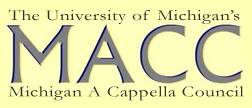
<style>
.page{position:relative;width:252px;height:108px;background:#ffffb4}
.page>*{position:absolute;margin:0}
.t1{font:15.2px "Garamond";letter-spacing:0.025em;color:#2e2e2e;scale:1.27 1}
.t2{font:15.2px "Garamond";letter-spacing:0.025em;color:#2e2e2e;scale:1.29 1}
</style>
<div class="page">
<p class="t1" style="left:8px;top:9px;width:232px;height:15px">The University of Michigan’s</p>
<p class="t2" style="left:8px;top:86px;width:236px;height:15px">Michigan A Cappella Council</p>
</div>
